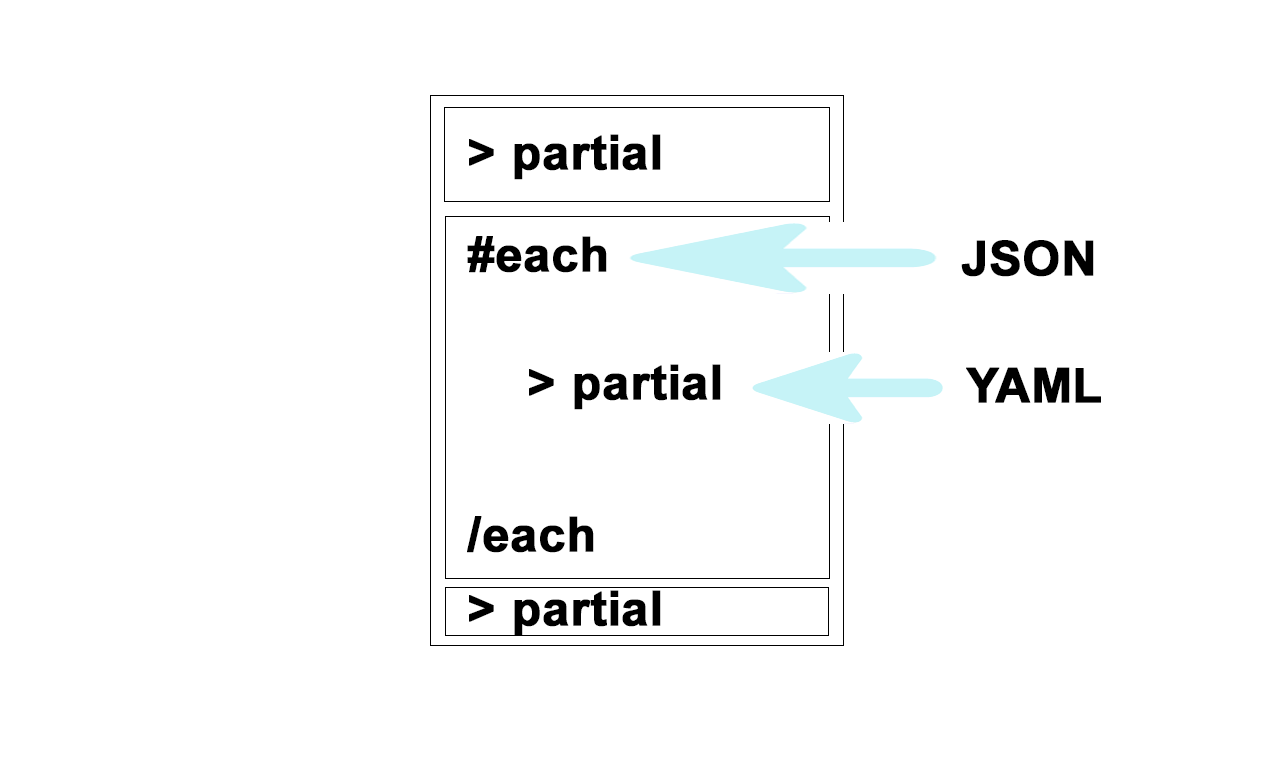
<style>
.page{position:relative;width:1280px;height:768px;background:#ffffff}
.page>*{position:absolute;margin:0}
.t1{font:48px "Arial-BoldMT";color:#000000;font-weight:bold}
</style>
<div class="page">
<p class="t1" style="left:469px;top:134px;width:192px;height:46px">&gt; partial</p>
<p class="t1" style="left:467px;top:236px;width:140px;height:37px">#each</p>
<p class="t1" style="left:961px;top:240px;width:133px;height:37px">JSON</p>
<p class="t1" style="left:529px;top:364px;width:192px;height:46px">&gt; partial</p>
<p class="t1" style="left:966px;top:367px;width:135px;height:36px">YAML</p>
<p class="t1" style="left:467px;top:516px;width:127px;height:37px">/each</p>
<p class="t1" style="left:469px;top:590px;width:192px;height:46px">&gt; partial</p>
</div>
